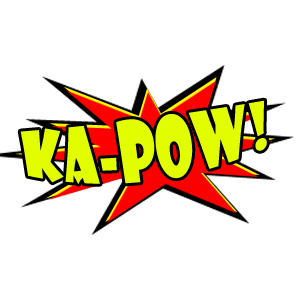
<style>
.page{position:relative;width:300px;height:300px;background:#ffffff}
.page>*{position:absolute;margin:0}
.t1{font:58.3px "ShowcardGothic-Reg";color:#e2fd00;scale:0.93 1}
</style>
<div class="page">
<p class="t1" style="left:20px;top:100px;width:247px;height:84px;rotate:-7deg">KA-POW!</p>
</div>
